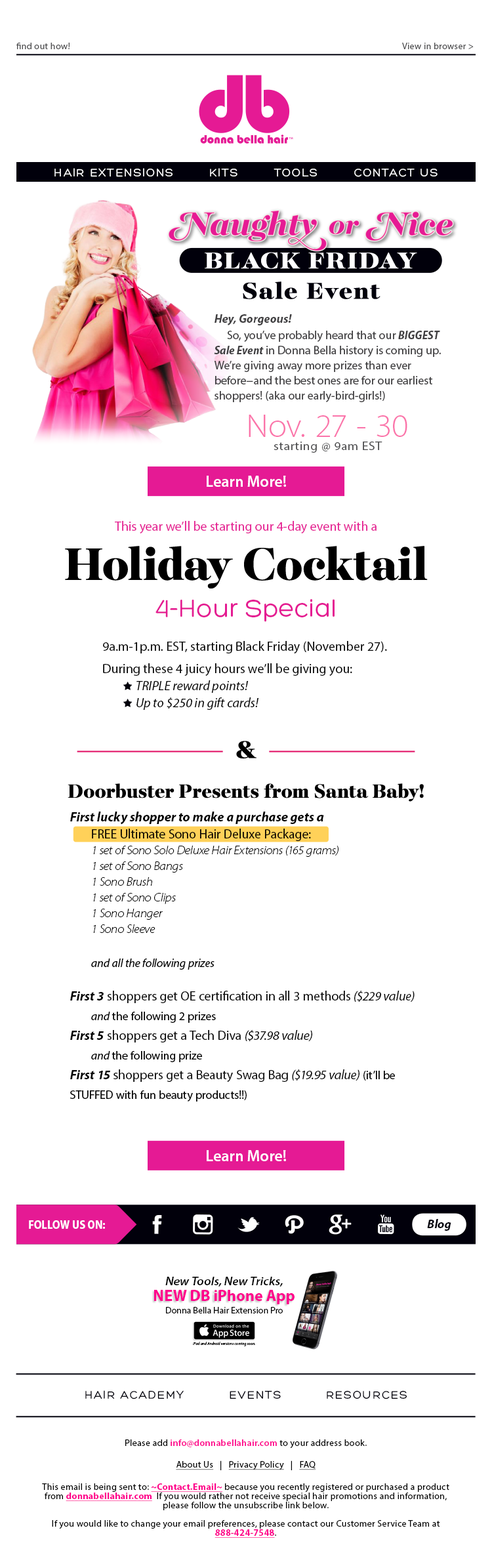
<style>
.page{position:relative;width:492px;height:1568px;background:#ffffff}
.page>*{position:absolute;margin:0}
.t1{font:9.2px "MyriadPro-Regular";letter-spacing:0.025em;color:#4d4d4f}
.t2{font:11.8px "Hero";letter-spacing:0.1em;color:#ffffff}
.t3{font:11.8px/15.1px "MyriadPro-Regular";color:#414042}
.t4{font:11.8px/15.1px "MyriadPro-BoldIt";color:#414042}
.t5{font:11.8px/16.4px "MyriadPro-Regular";color:#414042}
.t6{font:11.8px/16.4px "MyriadPro-BoldSemiCnIt";color:#414042}
.t7{font:11.8px/15.1px "MyriadPro-BoldSemiCnIt";color:#414042}
.t8{font:32.8px "MyriadPro-Light";letter-spacing:0.02em;color:#fb74aa;scale:1.05 1}
.t9{font:11.8px "MyriadPro-SemiExt";letter-spacing:0.04em;color:#4d4d4f}
.t10{font:15.7px "MyriadPro-Semibold";color:#ffffff}
.t11{font:13.1px "MyriadPro-Regular";color:#e51a92}
.t12{font:26.2px "Hero";color:#e51a92}
.t13{font:11.8px/15.7px "MyriadPro-LightSemiExtIt";color:#000000}
.t14{font:13.1px/17.1px "MyriadPro-BoldIt";color:#000000}
.t15{font:13.1px/17.1px "MyriadPro-Regular";color:#000000}
.t16{font:11.8px/17.1px "MyriadPro-It";color:#000000}
.t17{font:13.1px/19.7px "MyriadPro-Regular";color:#000000}
.t18{font:13.1px/19.7px "MyriadPro-BoldIt";color:#000000}
.t19{font:13.1px/19.7px "MyriadPro-It";color:#000000}
.t20{font:11.8px/19.7px "MyriadPro-It";color:#000000}
.t21{font:11.8px/19.7px "MyriadPro-Regular";color:#000000}
.t22{font:11.8px "MyriadPro-BoldSemiCn";color:#ffffff}
.t23{font:12.2px "MyriadPro-BoldIt";color:#01000b}
.t24{font:11.8px "MyriadPro-SemiboldSemiExtIt";color:#000000}
.t25{font:15.7px "MyriadPro-Bold";color:#ff008c}
.t26{font:9.2px "MyriadPro-Regular";color:#000000}
.t27{font:3.9px "MyriadPro-It";color:#000000}
.t28{font:11.8px "Hero";letter-spacing:0.1em;color:#01000b}
.t29{font:9.2px/9.2px "MyriadPro-Regular";letter-spacing:0.025em;color:#000000}
.t30{font:9.2px "MyriadPro-Regular";letter-spacing:0.025em;color:#000000}
.t31{font:9.2px "MyriadPro-Semibold";letter-spacing:0.025em;color:#ff008c}
.t32{font:9.2px "MyriadPro-Regular";letter-spacing:0.025em;color:#000000;text-decoration:underline}
.t33{font:9.2px "MyriadPro-Bold";letter-spacing:0.025em;color:#ff008c;text-decoration:underline}
.t34{font:9.2px/9.2px "MyriadPro-Bold";letter-spacing:0.025em;color:#ff008c;text-decoration:underline}
</style>
<div class="page">
<p class="t1" style="left:16px;top:43px;width:458px;height:6px">find out how!                           View in browser &gt;</p>
<p class="t2" style="left:54px;top:168px;width:384px;height:9px">HAIR EXTENSIONS        KITS        TOOLS        CONTACT US</p>
<p class="t3" style="left:214px;top:314px;width:227px;height:88px"><span class="t4">Hey, Gorgeous! <br></span><span class="t5">     So, you’ve probably heard that our </span><span class="t6">BIGGEST </span><span class="t7">Sale Event</span> in Donna Bella history is coming up. We’re giving away more prizes than ever before­­−and the best ones are for our earliest shoppers! (aka our early­-bird­-girls!)</p>
<p class="t8" style="left:249px;top:415px;width:158px;height:22px">Nov. 27 ­- 30</p>
<p class="t9" style="left:274px;top:442px;width:108px;height:11px">starting @ 9am EST</p>
<p class="t10" style="left:207px;top:476px;width:79px;height:11px">Learn More!</p>
<p class="t11" style="left:115px;top:521px;width:262px;height:12px">This year we’ll be starting our 4­-day event with a</p>
<p class="t12" style="left:155px;top:599px;width:180px;height:23px">4-Hour Special</p>
<p class="t13" style="left:70px;top:812px;width:269px;height:158px"><span class="t14">First lucky shopper to make a purchase gets a<br></span><span class="t15"> FREE Ultimate Sono Hair Deluxe Package: <br></span> 1 set of Sono Solo Deluxe Hair Extensions (165 grams)<br> 1 set of Sono Bangs<br> 1 Sono Brush<br> 1 set of Sono Clips<br> 1 Sono Hanger<br> 1 Sono Sleeve<br><br> <span class="t16">and all the following prizes</span></p>
<p class="t17" style="left:70px;top:991px;width:345px;height:111px"><span class="t18">First 3</span> shoppers get OE certification in all 3 methods<span class="t19"> ($229 value) <br></span><span class="t20"> and </span><span class="t21">the following 2 prizes<br></span><span class="t18">First 5</span> shoppers get a Tech Diva <span class="t19">($37.98 value) <br></span><span class="t20"> and </span><span class="t21">the following prize<br></span><span class="t18">First 15</span> shoppers get a Beauty Swag Bag <span class="t19">($19.95 value) </span><span class="t21">(it’ll be STUFFED with fun beauty products!!)</span></p>
<p class="t10" style="left:207px;top:1150px;width:79px;height:11px">Learn More!</p>
<p class="t22" style="left:29px;top:1220px;width:76px;height:9px">FOLLOW US ON:</p>
<p class="t23" style="left:427px;top:1219px;width:24px;height:12px">Blog</p>
<p class="t24" style="left:165px;top:1277px;width:118px;height:10px">New Tools, New Tricks,</p>
<p class="t25" style="left:154px;top:1290px;width:141px;height:14px">NEW DB iPhone App</p>
<p class="t26" style="left:166px;top:1307px;width:117px;height:6px">Donna Bella Hair Extension Pro</p>
<p class="t27" style="left:193px;top:1342px;width:62px;height:4px">iPad and Android versions coming soon.</p>
<p class="t28" style="left:85px;top:1390px;width:322px;height:9px">HAIR ACADEMY          EVENTS          RESOURCES</p>
<p class="t29" style="left:42px;top:1439px;width:407px;height:99px;text-align:center"><span class="t30">Please add </span><span class="t31">info@donnabellahair.com</span><span class="t30"> to your address book.<br><br></span><span class="t32">About Us</span><span class="t30">   |   </span><span class="t32">Privacy Policy</span><span class="t30">   |   </span><span class="t32">FAQ<br></span><span class="t30"><br>This email is being sent to: </span><span class="t33">~Contact.Email~</span><span class="t30"> because you recently registered </span>or purchased a product from <span class="t34">donnabellahair.com</span>  If you would rather not receive special hair promotions and information, please follow the unsubscribe link below.<br><br>If you would like to change your email preferences, please contact our Customer Service Team at <span class="t34">888-424-7548</span>.</p>
</div>
